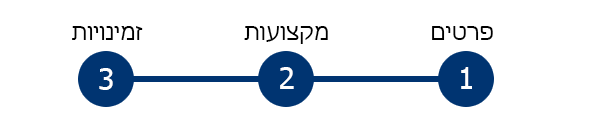
<style>
.page{position:relative;width:600px;height:120px;background:#ffffff}
.page>*{position:absolute;margin:0}
.t1{font:22px "Tahoma";color:#000000}
.t2{font:29.5px "Tahoma";color:#ffffff}
</style>
<div class="page">
<p class="t1" style="left:72px;top:26px;width:71px;height:14px">תויונימז</p>
<p class="t1" style="left:244px;top:26px;width:84px;height:18px">תועוצקמ</p>
<p class="t1" style="left:432px;top:26px;width:61px;height:14px">םיטרפ</p>
<p class="t2" style="left:99px;top:68px;width:14px;height:22px">3</p>
<p class="t2" style="left:280px;top:67px;width:14px;height:22px">2</p>
<p class="t2" style="left:461px;top:67px;width:11px;height:22px">1</p>
</div>
